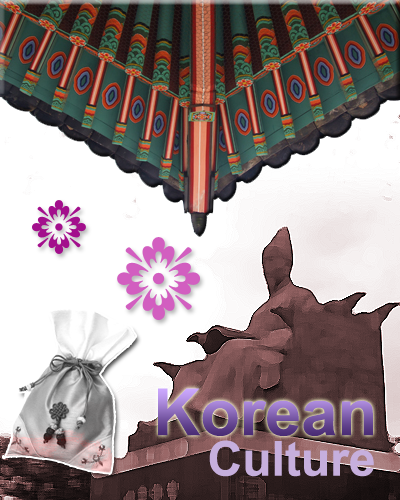
<style>
.page{position:relative;width:400px;height:500px}
.page>*{position:absolute;margin:0}
.t1{font:65px "Arial-BoldMT"}
.t2{font:48px "Arial-BoldMT";color:#c6afdd}
</style>
<div class="page">
<p class="t1" style="left:158px;top:388px;width:215px;height:48px">Korean</p>
<p class="t2" style="left:209px;top:440px;width:165px;height:37px">Culture</p>
</div>
